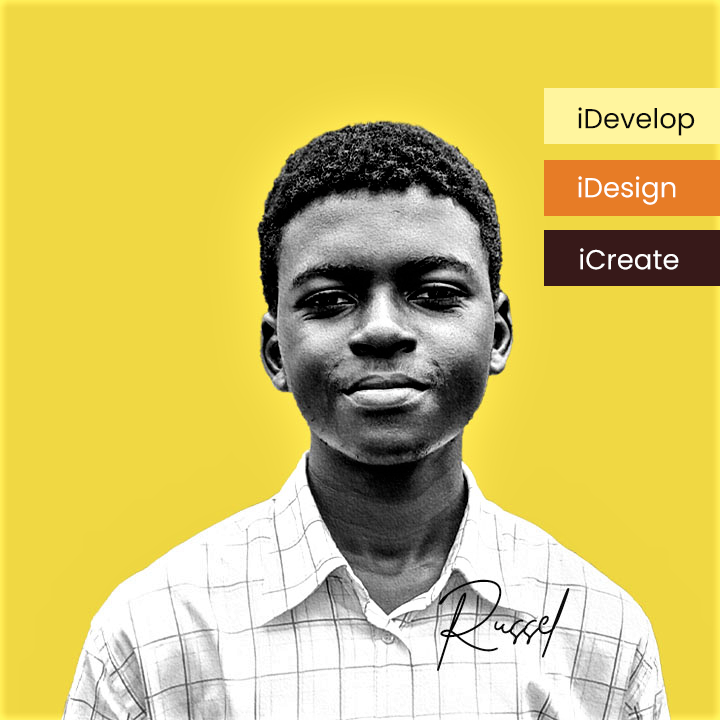
<style>
.page{position:relative;width:720px;height:720px;background:#f0d843}
.page>*{position:absolute;margin:0}
.t1{font:27.5px "Poppins-Regular";color:#0a0a0a}
.t2{font:27.5px "Poppins-Regular";color:#ffffff}
</style>
<div class="page">
<p class="t1" style="left:578px;top:107px;width:117px;height:29px">iDevelop</p>
<p class="t2" style="left:578px;top:176px;width:98px;height:29px">iDesign</p>
<p class="t2" style="left:580px;top:248px;width:99px;height:22px">iCreate</p>
</div>
